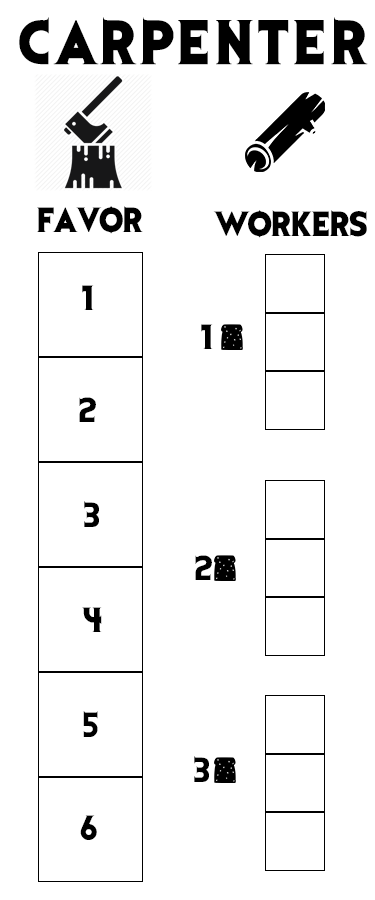
<style>
.page{position:relative;width:375px;height:900px;background:#ffffff}
.page>*{position:absolute;margin:0}
.t1{font:52.1px "EvilDead";letter-spacing:0.1em;color:#000000}
.t2{font:29.2px "EvilDead";color:#000000}
</style>
<div class="page">
<p class="t1" style="left:19px;top:17px;width:349px;height:48px">CARPENTER</p>
<p class="t2" style="left:37px;top:206px;width:106px;height:28px">FAVOR</p>
<p class="t2" style="left:213px;top:210px;width:154px;height:28px">WORKERS</p>
<p class="t2" style="left:82px;top:285px;width:12px;height:25px">1</p>
<p class="t2" style="left:201px;top:324px;width:12px;height:25px">1</p>
<p class="t2" style="left:79px;top:397px;width:17px;height:25px">2</p>
<p class="t2" style="left:84px;top:501px;width:15px;height:26px">3</p>
<p class="t2" style="left:195px;top:555px;width:17px;height:25px">2</p>
<p class="t2" style="left:82px;top:607px;width:20px;height:25px">4</p>
<p class="t2" style="left:83px;top:711px;width:15px;height:26px">5</p>
<p class="t2" style="left:194px;top:756px;width:15px;height:26px">3</p>
<p class="t2" style="left:80px;top:815px;width:17px;height:25px">6</p>
</div>
